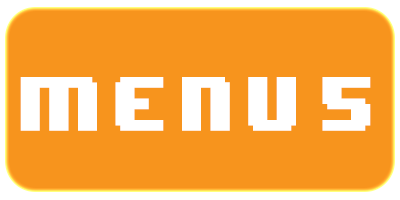
<style>
.page{position:relative;width:400px;height:200px;background:#f7941d}
.page>*{position:absolute;margin:0}
.t1{font:64.3px "8BITWONDERNominal";letter-spacing:0.16em;color:#ffffff;scale:0.89 1}
</style>
<div class="page">
<p class="t1" style="left:20px;top:77px;width:351px;height:54px">Menu 5</p>
</div>
